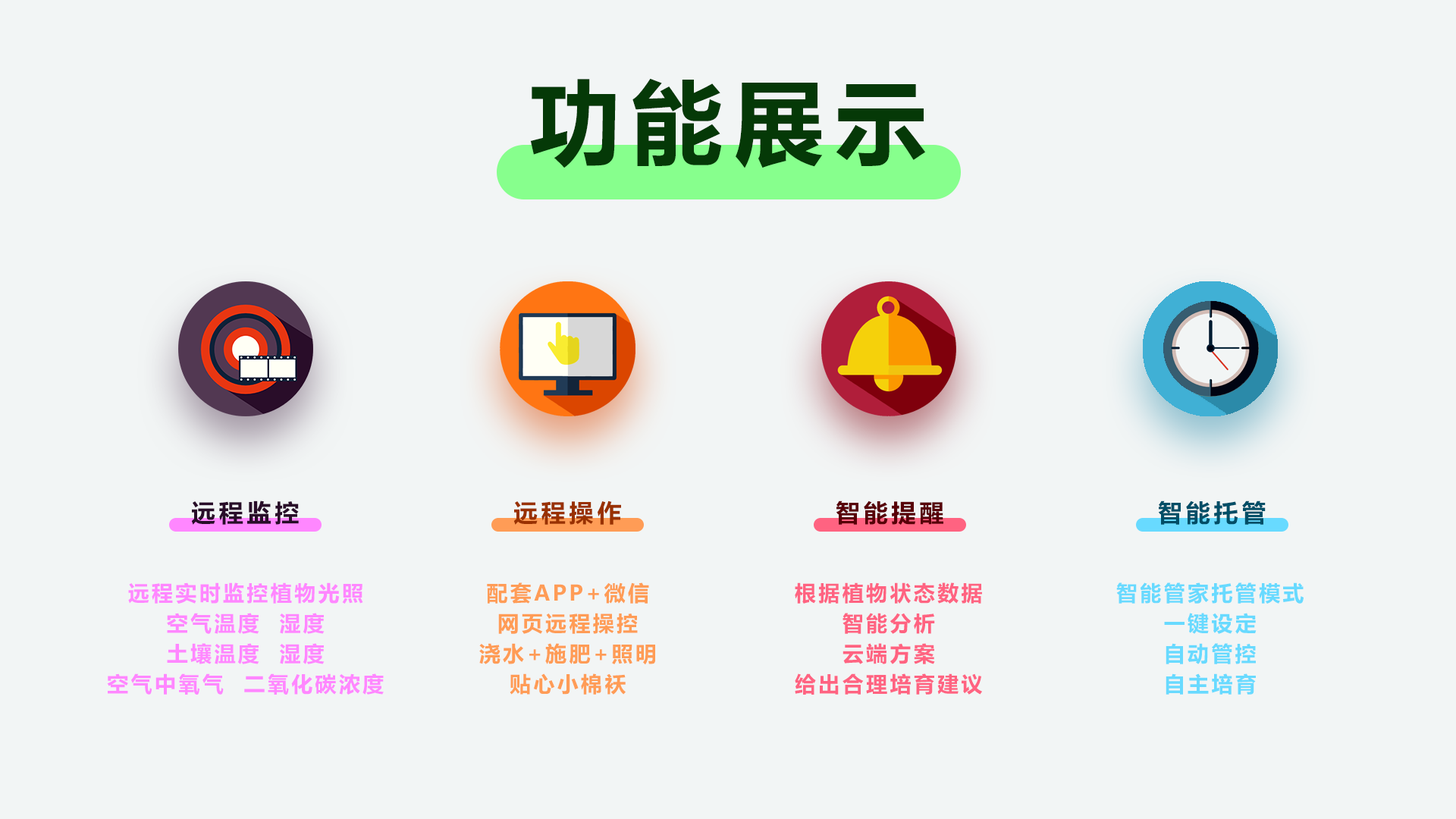
<style>
.page{position:relative;width:1456px;height:819px;background:#f2f5f5}
.page>*{position:absolute;margin:0}
.t1{font:91px "MicrosoftYaHei-Bold";letter-spacing:0.12em;color:#053907}
.t2{font:24.3px "MicrosoftYaHei-Bold";letter-spacing:0.15em;color:#290d29}
.t3{font:24.3px "MicrosoftYaHei-Bold";letter-spacing:0.15em;color:#993100}
.t4{font:24.3px "MicrosoftYaHei-Bold";letter-spacing:0.15em;color:#580008}
.t5{font:24.3px "MicrosoftYaHei-Bold";letter-spacing:0.15em;color:#004e67}
.t6{font:21.2px/30.3px "MicrosoftYaHei-Bold";letter-spacing:0.12em;color:#ff87ff}
.t7{font:21.2px/30.3px "MicrosoftYaHei-Bold";letter-spacing:0.12em;color:#ff9c56}
.t8{font:21.2px/30.3px "MicrosoftYaHei-Bold";letter-spacing:0.12em;color:#ff6381}
.t9{font:21.2px/30.3px "MicrosoftYaHei-Bold";letter-spacing:0.12em;color:#68daff}
</style>
<div class="page">
<p class="t1" style="left:530px;top:78px;width:395px;height:90px">功能展示</p>
<p class="t2" style="left:191px;top:500px;width:108px;height:25px">远程监控</p>
<p class="t3" style="left:513px;top:500px;width:108px;height:25px">远程操作</p>
<p class="t4" style="left:836px;top:500px;width:107px;height:25px">智能提醒</p>
<p class="t5" style="left:1158px;top:500px;width:108px;height:25px">智能托管</p>
<p class="t6" style="left:107px;top:582px;width:277px;height:113px;text-align:center">远程实时监控植物光照<br>空气温度  湿度<br>土壤温度  湿度<br>空气中氧气  二氧化碳浓度</p>
<p class="t7" style="left:479px;top:582px;width:176px;height:113px;text-align:center">配套APP+微信<br>网页远程操控<br>浇水+施肥+照明<br>贴心小棉袄</p>
<p class="t8" style="left:795px;top:582px;width:187px;height:113px;text-align:center">根据植物状态数据<br>智能分析<br>云端方案<br>给出合理培育建议</p>
<p class="t9" style="left:1116px;top:582px;width:188px;height:113px;text-align:center">智能管家托管模式<br>一键设定<br>自动管控<br>自主培育</p>
</div>
